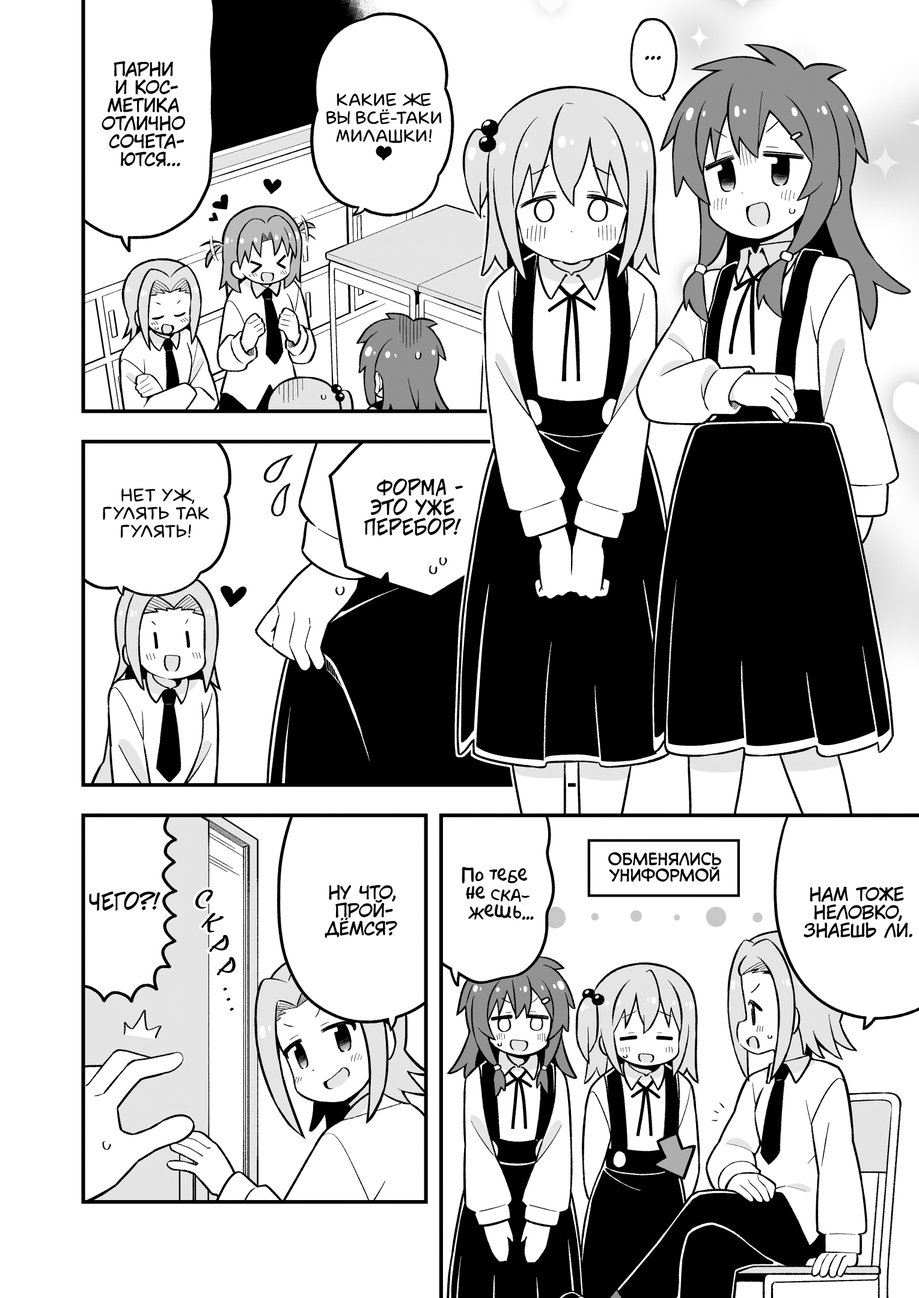
<style>
.page{position:relative;width:919px;height:1298px;background:#ffffff}
.page>*{position:absolute;margin:0}
.t1{font:18px "KuraiVoice2";color:#000000;text-transform:uppercase}
.t2{font:21.6px "KuraiVoice2";color:#000000;text-transform:uppercase}
.t3{font:18px "laCartoonerie";color:#000000;text-transform:uppercase}
.t4{font:19.8px "v_CCJeffCampbell";color:#000000;text-transform:uppercase}
.t5{font:16.2px "v_CCMonologous";color:#000000;text-transform:uppercase}
.t6{font:18px "AkbarPlain";color:#000000}
.t7{font:21.6px "v_CCJeffCampbell";color:#000000;text-transform:uppercase}
.t8{font:28.8px "MistralC";color:#000000;text-transform:uppercase}
</style>
<div class="page">
<p class="t1" style="left:102px;top:61px;width:83px;height:105px;text-align:center">Парни<br>и кос-<br>метика<br>отлично<br>сочета-<br>ются...</p>
<p class="t2" style="left:645px;top:56px;width:16px;height:4px">...</p>
<p class="t3" style="left:326px;top:93px;width:116px;height:67px;text-align:center">Какие же<br>вы всё-таки<br>милашки!<br><span class="t1">♥</span></p>
<p class="t4" style="left:364px;top:478px;width:99px;height:58px;text-align:center">Форма -<br>это уже<br>перебор!</p>
<p class="t3" style="left:103px;top:488px;width:106px;height:50px;text-align:center">Нет уж,<br>гулять так<br>гулять!</p>
<p class="t5" style="left:608px;top:852px;width:113px;height:30px;text-align:center">Обменялись<br>униформой</p>
<p class="t6" style="left:461px;top:866px;width:73px;height:54px;text-align:center">По тебе<br>не ска-<br>жешь...</p>
<p class="t7" style="left:89px;top:891px;width:71px;height:20px">Чего?!</p>
<p class="t8" style="left:195px;top:889px;width:18px;height:20px;rotate:21deg">с</p>
<p class="t1" style="left:324px;top:884px;width:73px;height:54px;text-align:center">Ну что,<br>прой-<br>дёмся?</p>
<p class="t1" style="left:803px;top:886px;width:109px;height:52px;text-align:center">Нам тоже<br>неловко,<br>знаешь ли.</p>
<p class="t8" style="left:201px;top:913px;width:23px;height:20px;rotate:33deg">к</p>
<p class="t8" style="left:209px;top:935px;width:20px;height:17px;rotate:42deg">р</p>
<p class="t8" style="left:216px;top:957px;width:20px;height:18px;rotate:36deg">р</p>
<p class="t8" style="left:223px;top:987px;width:4px;height:4px">.</p>
<p class="t8" style="left:227px;top:997px;width:4px;height:4px">.</p>
<p class="t8" style="left:230px;top:1007px;width:4px;height:4px">.</p>
</div>
